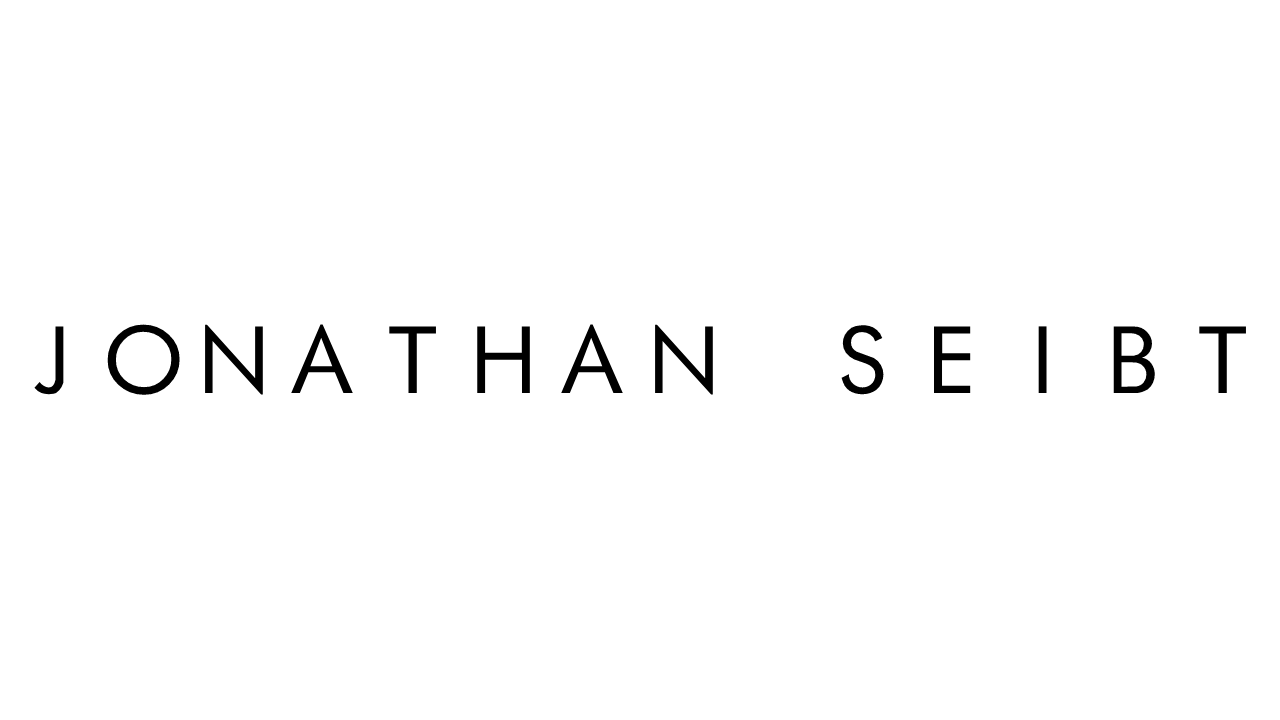
<style>
.page{position:relative;width:1280px;height:720px;background:#ffffff}
.page>*{position:absolute;margin:0}
.t1{font:90px "FuturistFixedWidth-Regular";color:#000000}
</style>
<div class="page">
<p class="t1" style="left:34px;top:324px;width:1212px;height:71px">JONATHAN SEIBT</p>
</div>
